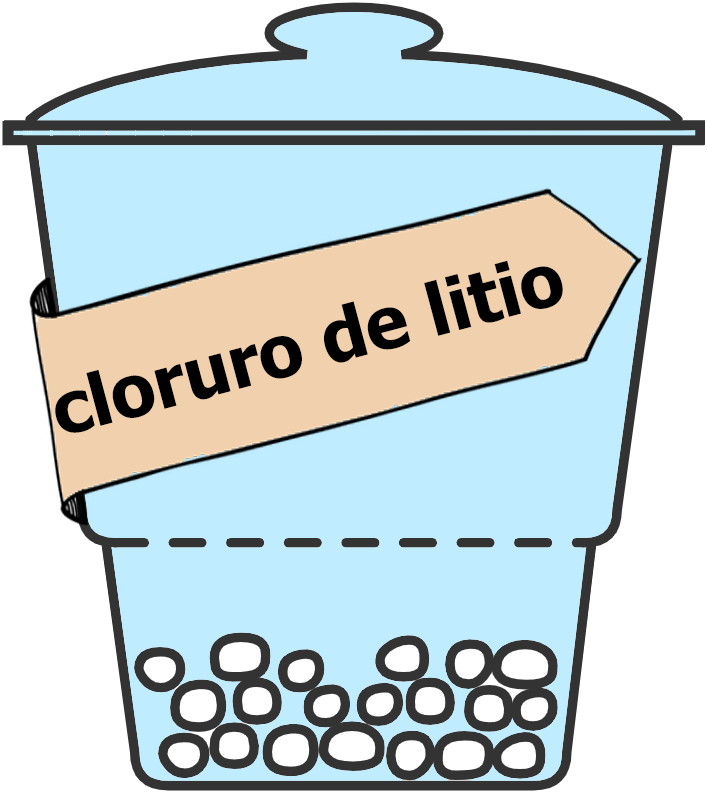
<style>
.page{position:relative;width:707px;height:792px;background:#bfedff}
.page>*{position:absolute;margin:0}
.t1{font:72px "Tahoma-Bold";color:#000000}
</style>
<div class="page">
<p class="t1" style="left:55px;top:260px;width:508px;height:173px;rotate:-15deg">cloruro de litio</p>
</div>
